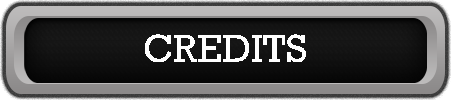
<style>
.page{position:relative;width:451px;height:100px}
.page>*{position:absolute;margin:0}
.t1{font:39.8px "Rockwell";color:#ffffff}
</style>
<div class="page">
<p class="t1" style="left:145px;top:34px;width:161px;height:28px">CREDITS</p>
</div>
